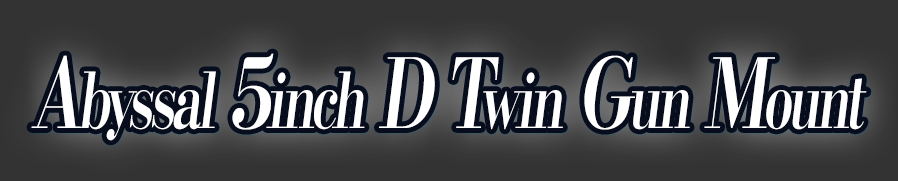
<style>
.page{position:relative;width:898px;height:181px;background:#333333}
.page>*{position:absolute;margin:0}
.t1{font:76.8px "KochoStd-Heavy";letter-spacing:-0.08em;color:#ffffff;font-style:italic;scale:0.71 1}
.t2{font:96px "KochoStd-Heavy";letter-spacing:-0.08em;color:#ffffff;font-style:italic;scale:0.71 1}
</style>
<div class="page">
<p class="t1" style="left:31px;top:53px;width:836px;height:88px"><span class="t2">A</span>byssal<span class="t2"> 5</span>inch<span class="t2"> D T</span>win<span class="t2"> G</span>un<span class="t2"> M</span>ount</p>
</div>
